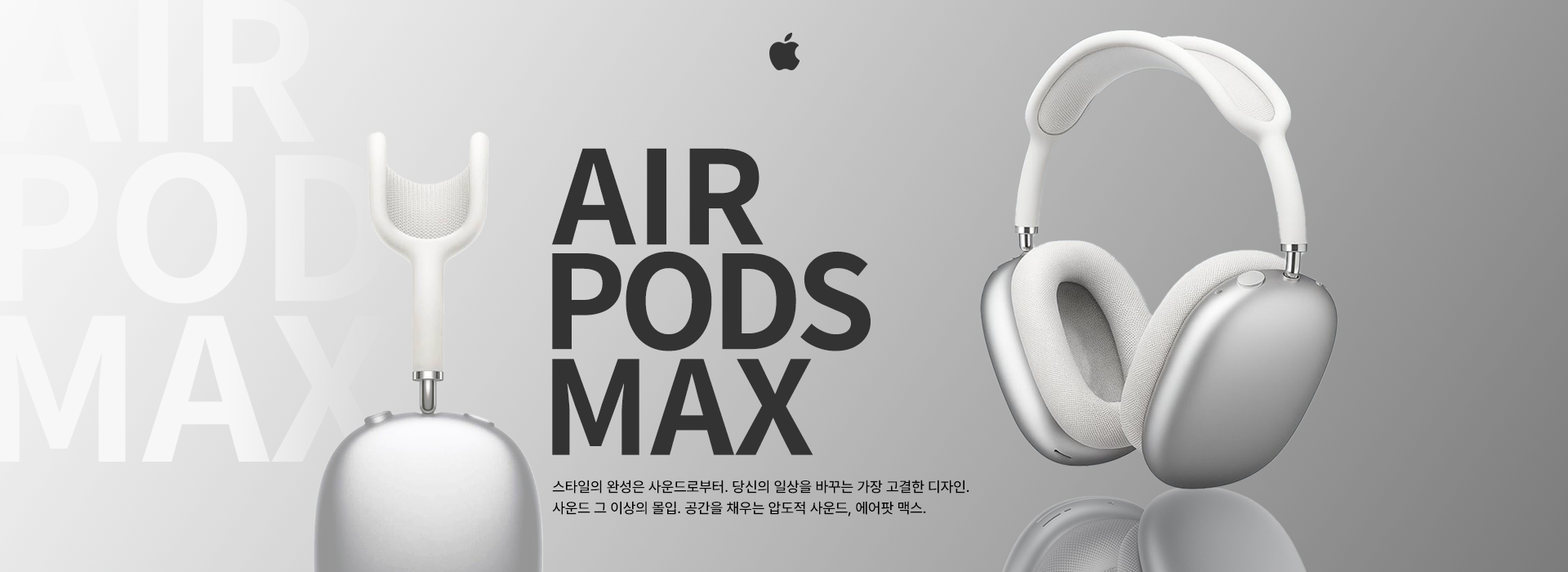
<style>
.page{position:relative;width:1568px;height:572px}
.page>*{position:absolute;margin:0}
.t1{font:129.1px "NotoSansKR-Bold";color:#333333}
.t2{font:129.1px/105.6px "NotoSansKR-Bold";letter-spacing:-0.06em;color:#333333}
.t3{font:129.1px/105.6px "NotoSansKR-Bold";color:#333333}
.t4{font:14.7px "Pretendard-Medium";color:#000000}
</style>
<div class="page">
<p class="t1" style="left:552px;top:148px;width:212px;height:97px">AIR</p>
<p class="t2" style="left:552px;top:251px;width:319px;height:204px"><span class="t3"><br></span>PODS<br><span class="t3">MAX</span></p>
<p class="t4" style="left:552px;top:479px;width:417px;height:14px">스타일의 완성은 사운드로부터. 당신의 일상을 바꾸는 가장 고결한 디자인.</p>
<p class="t4" style="left:552px;top:501px;width:374px;height:15px">사운드 그 이상의 몰입. 공간을 채우는 압도적 사운드, 에어팟 맥스.</p>
</div>
